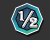
<style>
.page{position:relative;width:50px;height:40px;background:#333333}
.page>*{position:absolute;margin:0}
.t1{font:24.7px "Algerian";color:#ffffff}
</style>
<div class="page">
<p class="t1" style="left:18px;top:10px;width:20px;height:18px">½</p>
</div>
